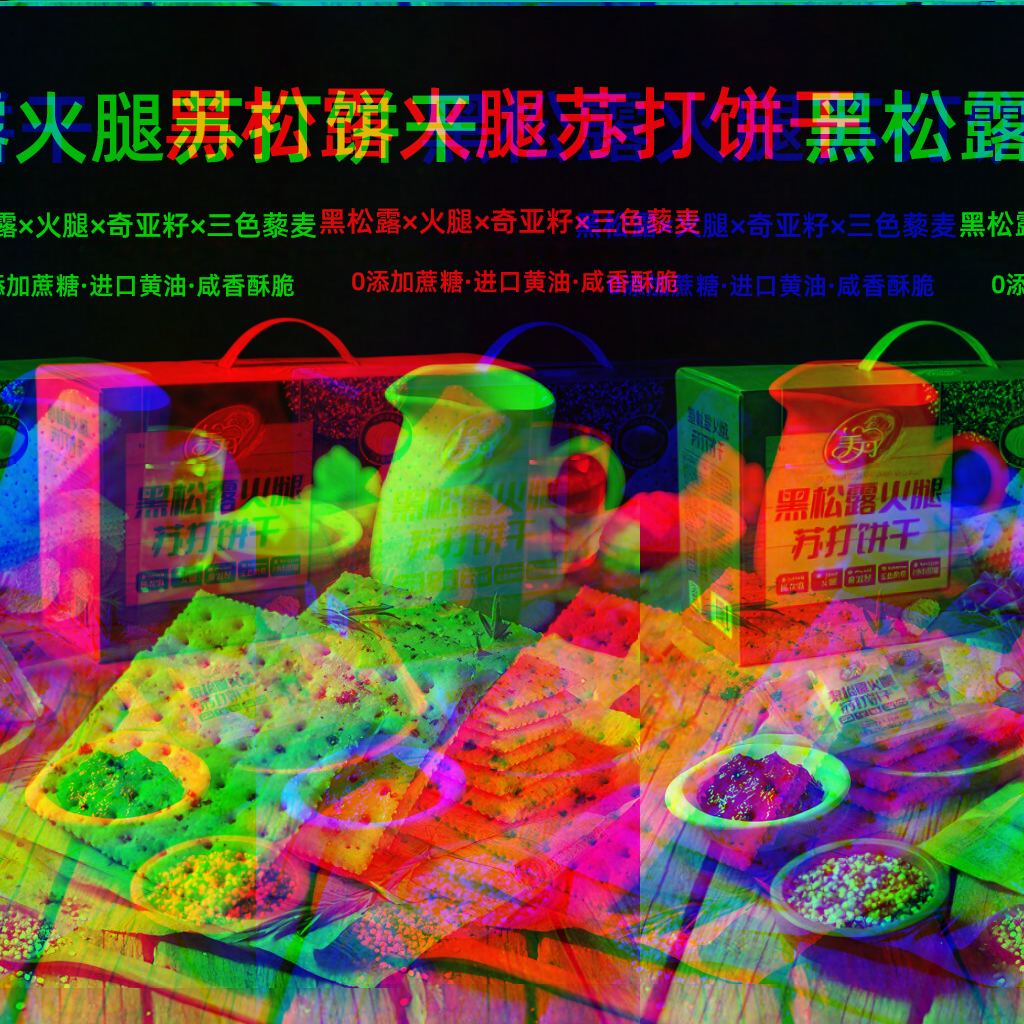
<style>
.page{position:relative;width:1024px;height:1024px}
.page>*{position:absolute;margin:0}
.t1{font:79.2px "AlibabaPuHuiTi-Medium"}
.t2{font:28.3px "AlibabaPuHuiTi-Medium"}
.t3{font:25px "AlibabaPuHuiTi-Medium"}
</style>
<div class="page">
<p class="t1" style="left:166px;top:84px;width:694px;height:75px">黑松露火腿苏打饼干</p>
<p class="t2" style="left:320px;top:205px;width:380px;height:28px">黑松露×火腿×奇亚籽×三色藜麦</p>
<p class="t3" style="left:352px;top:267px;width:326px;height:24px">0添加蔗糖·进口黄油·咸香酥脆</p>
</div>
